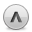
<style>
.page{position:relative;width:32px;height:32px;background:#ffffff}
.page>*{position:absolute;margin:0}
.t1{font:19px "Arial-Black";color:#555555;text-transform:uppercase}
</style>
<div class="page">
<p class="t1" style="left:10px;top:11px;width:12px;height:12px;rotate:-90deg">&gt;</p>
</div>
